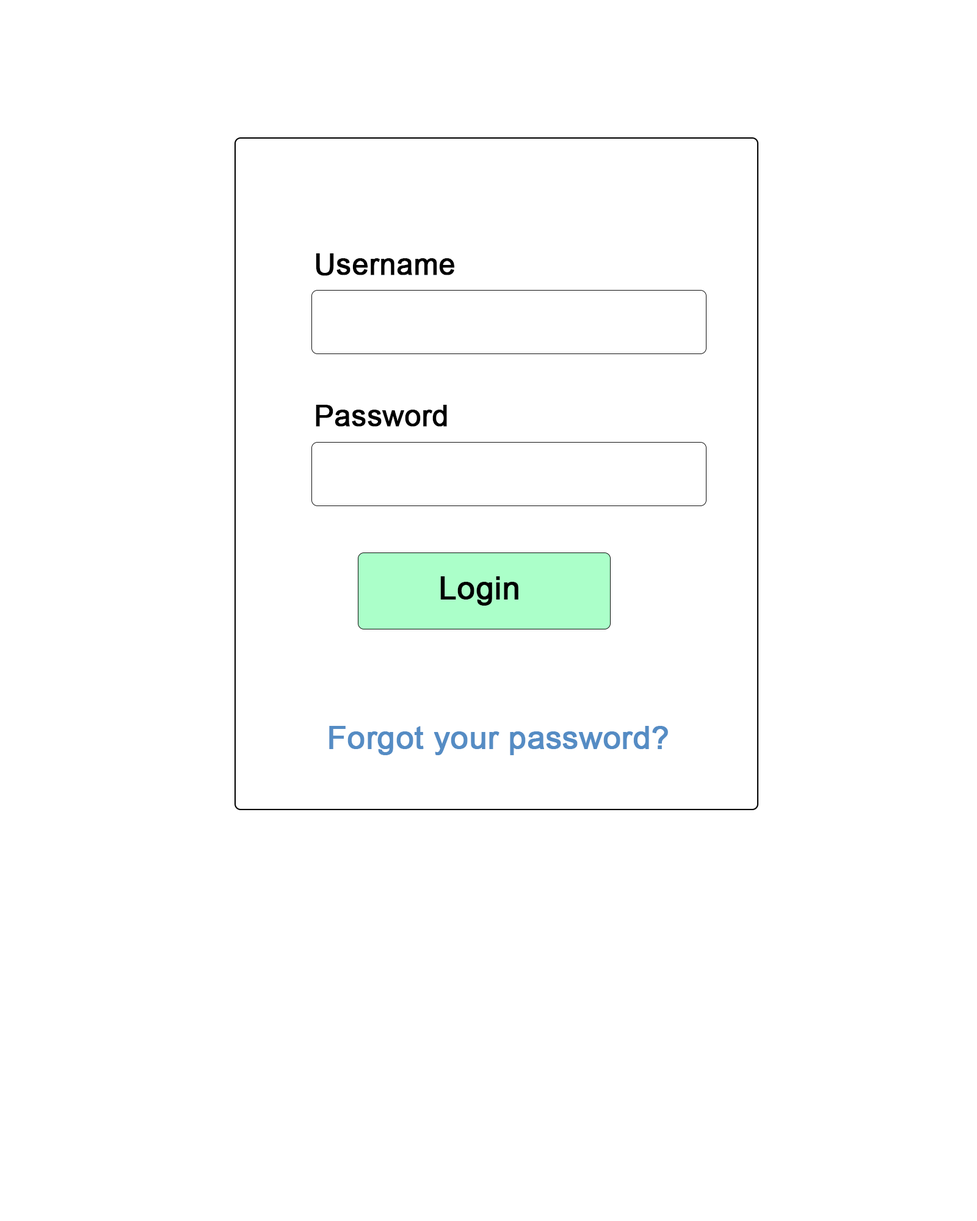
<style>
.page{position:relative;width:977px;height:1221px;background:#ffffff}
.page>*{position:absolute;margin:0}
.t1{font:29.3px "ArialMT";color:#000000;font-weight:bold}
.t2{font:31.7px "ArialMT";color:#000000;font-weight:bold}
.t3{font:31.7px "ArialMT";color:#558cc4;font-weight:bold}
</style>
<div class="page">
<p class="t1" style="left:316px;top:253px;width:138px;height:23px">Username</p>
<p class="t1" style="left:316px;top:405px;width:131px;height:22px">Password</p>
<p class="t2" style="left:440px;top:576px;width:78px;height:30px">Login</p>
<p class="t3" style="left:329px;top:726px;width:339px;height:29px">Forgot your password?</p>
</div>
